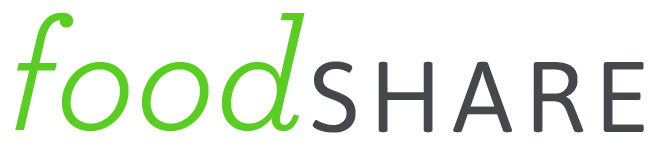
<style>
.page{position:relative;width:664px;height:147px;background:#ffffff}
.page>*{position:absolute;margin:0}
.t1{font:160px "Archer-BookItalic";color:#5acd23}
.t2{font:100px "Asap-Regular";letter-spacing:0.1em;color:#44484d;text-transform:uppercase}
</style>
<div class="page">
<p class="t1" style="left:15px;top:12px;width:290px;height:119px">food</p>
<p class="t2" style="left:312px;top:61px;width:332px;height:72px">Share</p>
</div>
